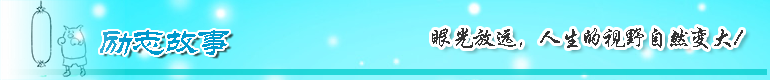
<style>
.page{position:relative;width:770px;height:80px}
.page>*{position:absolute;margin:0}
.t1{font:36px "STLiti";letter-spacing:-0.1em;color:#0099cc}
.t2{font:24px "STXingkai";letter-spacing:-0.1em;color:#333333}
</style>
<div class="page">
<p class="t1" style="left:100px;top:30px;width:129px;height:25px">励志故事</p>
<p class="t2" style="left:432px;top:27px;width:311px;height:22px">眼光放远，人生的视野自然变大！</p>
</div>
